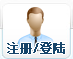
<style>
.page{position:relative;width:73px;height:59px;background:#ffffff}
.page>*{position:absolute;margin:0}
.t1{font:12px "SimSun";color:#16456a;font-weight:bold}
</style>
<div class="page">
<p class="t1" style="left:7px;top:42px;width:58px;height:12px">注册/登陆</p>
</div>
